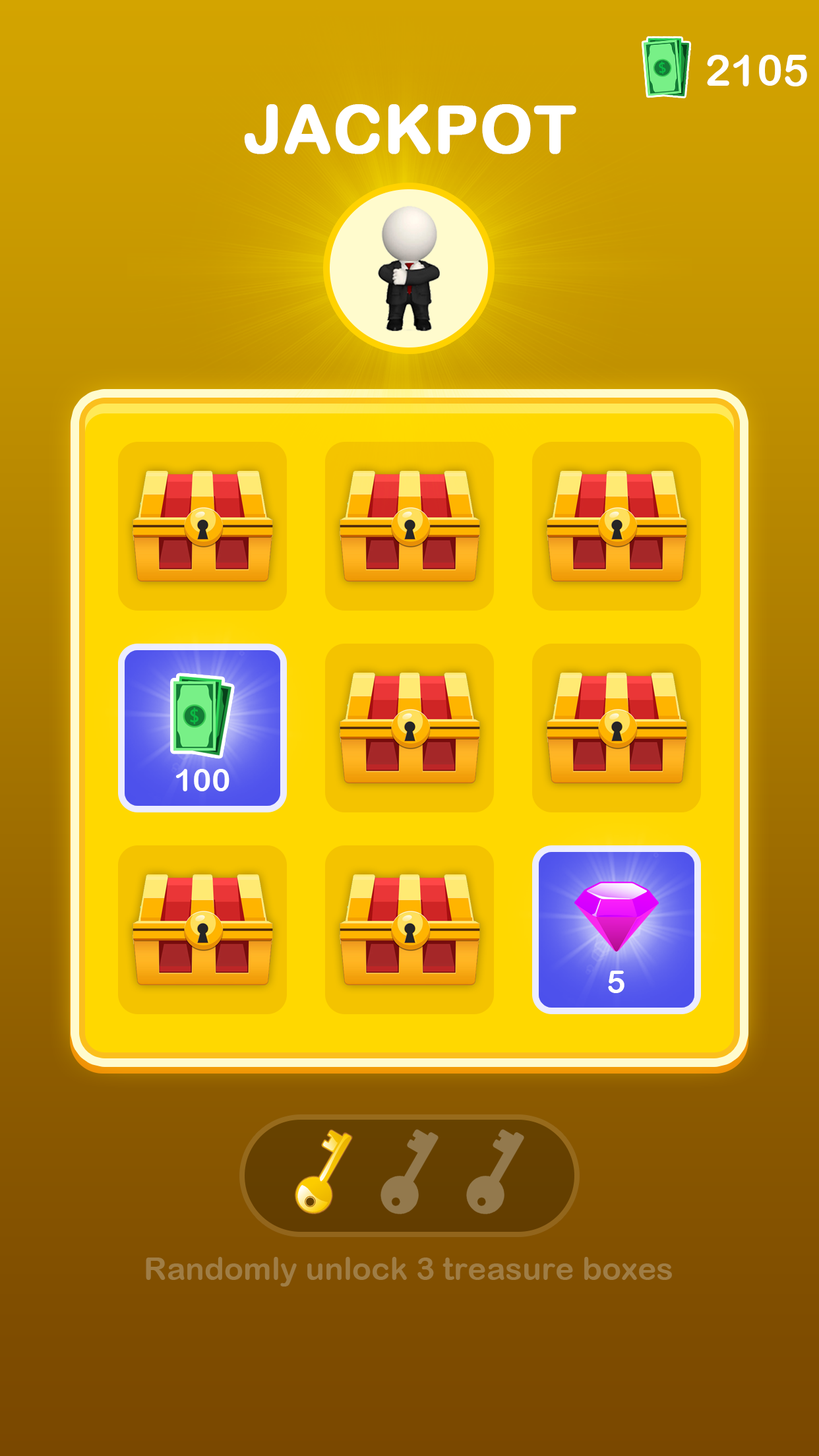
<style>
.page{position:relative;width:819px;height:1456px}
.page>*{position:absolute;margin:0}
.t1{font:43.5px "ArialRoundedMTBold";color:#ffffff}
.t2{font:65.9px "ArialRoundedMTBold";color:#ffffff;font-weight:bold}
.t3{font:31.7px "ArialRoundedMTBold";color:#ffffff}
.t4{font:31.7px "ArialRoundedMTBold";color:#9f7d45}
</style>
<div class="page">
<p class="t1" style="left:707px;top:55px;width:100px;height:31px">2105</p>
<p class="t2" style="left:244px;top:104px;width:332px;height:50px">JACKPOT</p>
<p class="t3" style="left:176px;top:769px;width:53px;height:22px">100</p>
<p class="t3" style="left:608px;top:971px;width:16px;height:22px">5</p>
<p class="t4" style="left:146px;top:1257px;width:526px;height:30px">Randomly unlock 3 treasure boxes</p>
</div>
